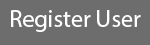
<style>
.page{position:relative;width:150px;height:45px;background:#6d6d6d}
.page>*{position:absolute;margin:0}
.t1{font:24px "MyriadPro-Regular";color:#ffffff}
</style>
<div class="page">
<p class="t1" style="left:11px;top:10px;width:130px;height:22px">Register User</p>
</div>
